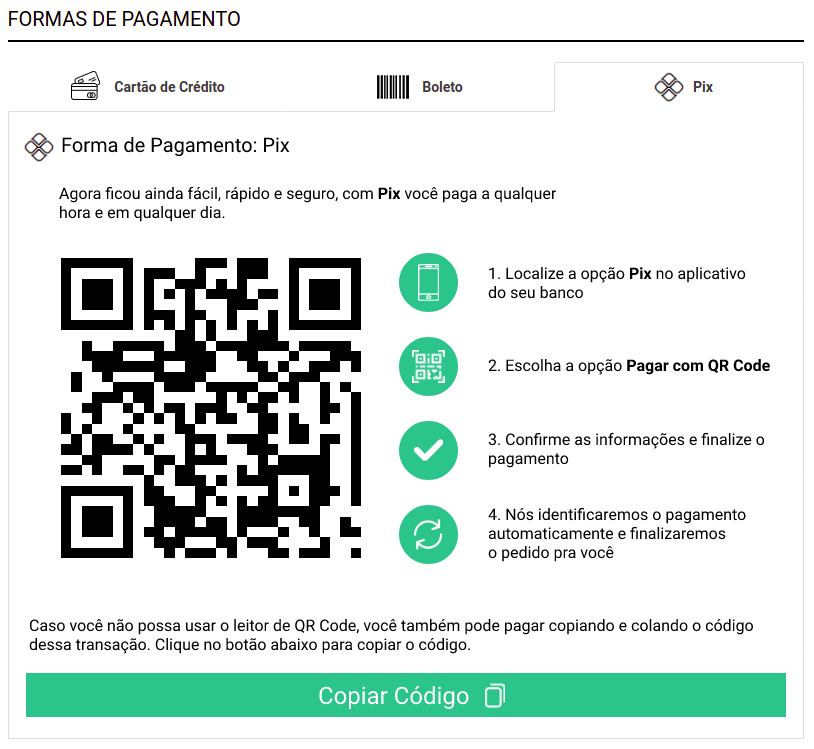
<style>
.page{position:relative;width:814px;height:749px;background:#ffffff}
.page>*{position:absolute;margin:0}
.t1{font:20px "Roboto-Regular";color:#000000}
.t2{font:16px "Roboto-Regular";color:#000000}
.t3{font:16px "Roboto-Bold";color:#000000}
.t4{font:24px "Roboto-Regular";color:#ffffff}
</style>
<div class="page">
<p class="t1" style="left:62px;top:137px;width:228px;height:20px">Forma de Pagamento: Pix</p>
<p class="t2" style="left:59px;top:186px;width:498px;height:36px">Agora ficou ainda fácil, rápido e seguro, com <span class="t3">Pix </span>você paga a qualquer <br>hora e em qualquer dia.</p>
<p class="t2" style="left:488px;top:267px;width:258px;height:32px">1. Localize a opção <span class="t3">Pix </span>no aplicativo <br>do seu banco</p>
<p class="t2" style="left:488px;top:359px;width:282px;height:16px">2. Escolha a opção <span class="t3">Pagar com QR Code</span></p>
<p class="t2" style="left:488px;top:432px;width:277px;height:36px">3. Confirme as informações e finalize o <br>pagamento</p>
<p class="t2" style="left:488px;top:507px;width:258px;height:55px">4. Nós identificaremos o pagamento <br>automaticamente e finalizaremos <br>o pedido pra você</p>
<p class="t2" style="left:29px;top:619px;width:724px;height:35px">Caso você não possa usar o leitor de QR Code, você também pode pagar copiando e colando o código <br>dessa transação. Clique no botão abaixo para copiar o código.</p>
<p class="t4" style="left:319px;top:686px;width:150px;height:23px">Copiar Código</p>
</div>
